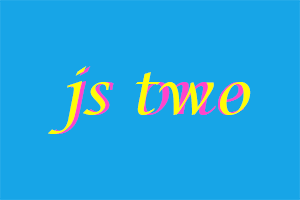
<style>
.page{position:relative;width:300px;height:200px;background:#17a5e7}
.page>*{position:absolute;margin:0}
.t1{font:61px "LucidaCalligraphy-Italic";color:#fffc07}
.t2{font:61px "LucidaCalligraphy-Italic"}
</style>
<div class="page">
<p class="t1" style="left:48px;top:66px;width:203px;height:68px">js two</p>
<p class="t2" style="left:52px;top:66px;width:193px;height:68px">js one</p>
</div>
